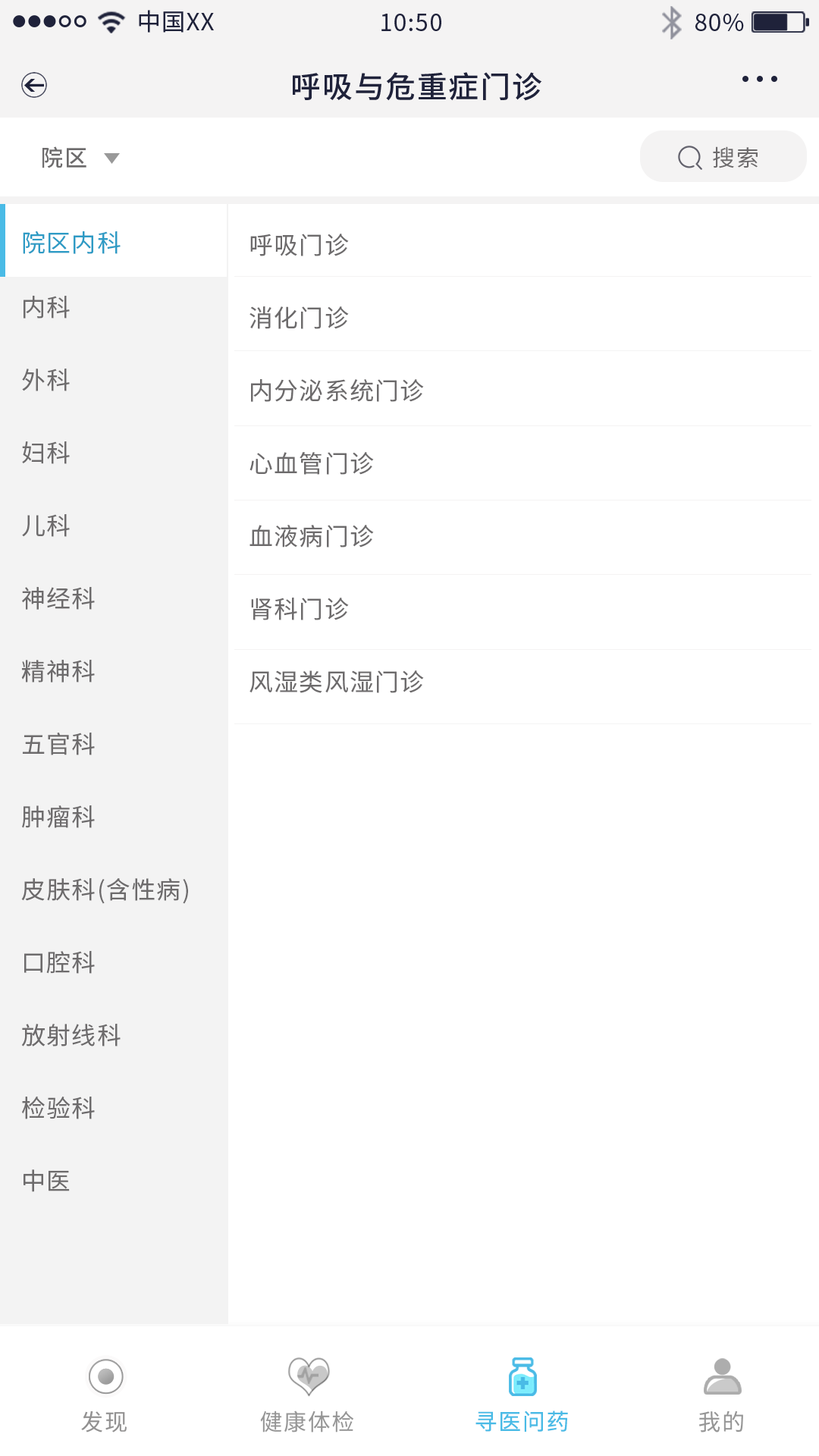
<style>
.page{position:relative;width:819px;height:1456px;background:#ffffff}
.page>*{position:absolute;margin:0}
.t1{font:23.8px "SourceHanSansCN-Regular";letter-spacing:0.04em;color:#1f223a}
.t2{font:30.3px "SourceHanSansCN-Medium";letter-spacing:0.04em;color:#1f223a}
.t3{font:22.7px "SourceHanSansCN-Medium";letter-spacing:0.04em;color:#6d6b6c}
.t4{font:22.7px "SourceHanSansCN-Normal";letter-spacing:0.04em;color:#6d6b6c}
.t5{font:24.3px "SourceHanSansCN-Regular";letter-spacing:0.04em;color:#2d9bc5}
.t6{font:24.3px/72.8px "SourceHanSansCN-Regular";letter-spacing:0.04em;color:#6d6b6c}
.t7{font:22.7px "SourceHanSansCN-Regular";letter-spacing:0.06em;color:#929191}
.t8{font:22.7px "SourceHanSansCN-Regular";letter-spacing:0.06em;color:#969696}
.t9{font:22.7px "SourceHanSansCN-Regular";letter-spacing:0.06em;color:#4abbe6}
</style>
<div class="page">
<p class="t1" style="left:139px;top:10px;width:75px;height:23px">中国XX</p>
<p class="t1" style="left:381px;top:14px;width:60px;height:17px">10:50</p>
<p class="t1" style="left:695px;top:14px;width:49px;height:17px">80%</p>
<p class="t2" style="left:293px;top:72px;width:249px;height:29px">呼吸与危重症门诊</p>
<p class="t3" style="left:42px;top:146px;width:44px;height:22px">院区</p>
<p class="t4" style="left:713px;top:146px;width:45px;height:22px">搜索</p>
<p class="t5" style="left:23px;top:231px;width:98px;height:23px">院区内科</p>
<p class="t6" style="left:249px;top:234px;width:175px;height:459px">呼吸门诊<br>消化门诊<br>内分泌系统门诊<br>心血管门诊<br>血液病门诊<br>肾科门诊<br>风湿类风湿门诊</p>
<p class="t6" style="left:21px;top:295px;width:167px;height:897px">内科<br>外科<br>妇科<br>儿科<br>神经科<br>精神科<br>五官科<br>肿瘤科<br>皮肤科(含性病)<br>口腔科<br>放射线科<br>检验科<br>中医</p>
<p class="t7" style="left:81px;top:1410px;width:46px;height:22px">发现</p>
<p class="t8" style="left:260px;top:1410px;width:93px;height:22px">健康体检</p>
<p class="t9" style="left:475px;top:1410px;width:93px;height:22px">寻医问药</p>
<p class="t8" style="left:698px;top:1410px;width:45px;height:22px">我的</p>
</div>
